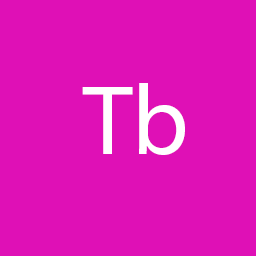
<style>
.page{position:relative;width:256px;height:256px;background:#df10b6}
.page>*{position:absolute;margin:0}
.t1{font:100px "MyriadPro-Regular";color:#ffffff}
</style>
<div class="page">
<p class="t1" style="left:82px;top:83px;width:103px;height:72px">Tb</p>
</div>
